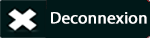
<style>
.page{position:relative;width:150px;height:38px;background:#001818}
.page>*{position:absolute;margin:0}
.t1{font:16.7px "MyriadPro-Regular";color:#ffffff;font-weight:bold}
</style>
<div class="page">
<p class="t1" style="left:51px;top:12px;width:96px;height:12px">Deconnexion</p>
</div>
